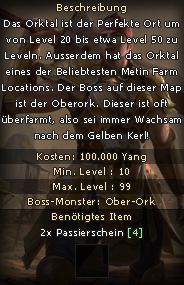
<style>
.page{position:relative;width:184px;height:285px}
.page>*{position:absolute;margin:0}
.t1{font:10px "Tahoma";letter-spacing:0.075em;color:#fee3ae}
.t2{font:10px/16px "Tahoma";letter-spacing:0.075em;color:#ffffff}
.t3{font:10px "Tahoma";letter-spacing:0.075em;color:#ffffff}
.t4{font:10px "Tahoma";letter-spacing:0.075em;color:#8df290}
</style>
<div class="page">
<p class="t1" style="left:57px;top:3px;width:69px;height:10px">Beschreibung</p>
<p class="t2" style="left:2px;top:19px;width:179px;height:120px;text-align:center">Das Orktal ist der Perfekte Ort um von Level 20 bis etwa Level 50 zu Leveln. Ausserdem hat das Orktal eines der Beliebtesten Metin Farm Locations. Der Boss auf dieser Map ist der Oberork. Dieser ist oft überfarmt, also sei immer Wachsam nach dem Gelben Kerl!</p>
<p class="t1" style="left:37px;top:153px;width:109px;height:9px">Kosten: 100.000 Yang</p>
<p class="t1" style="left:54px;top:167px;width:75px;height:8px">Min. Level : 10</p>
<p class="t1" style="left:53px;top:182px;width:77px;height:8px">Max. Level : 99</p>
<p class="t1" style="left:28px;top:197px;width:127px;height:8px">Boss-Monster: Ober-Ork</p>
<p class="t1" style="left:52px;top:213px;width:79px;height:9px">Benötigtes Item</p>
<p class="t3" style="left:41px;top:228px;width:101px;height:10px">2x Passierschein <span class="t4">[4]</span></p>
</div>
